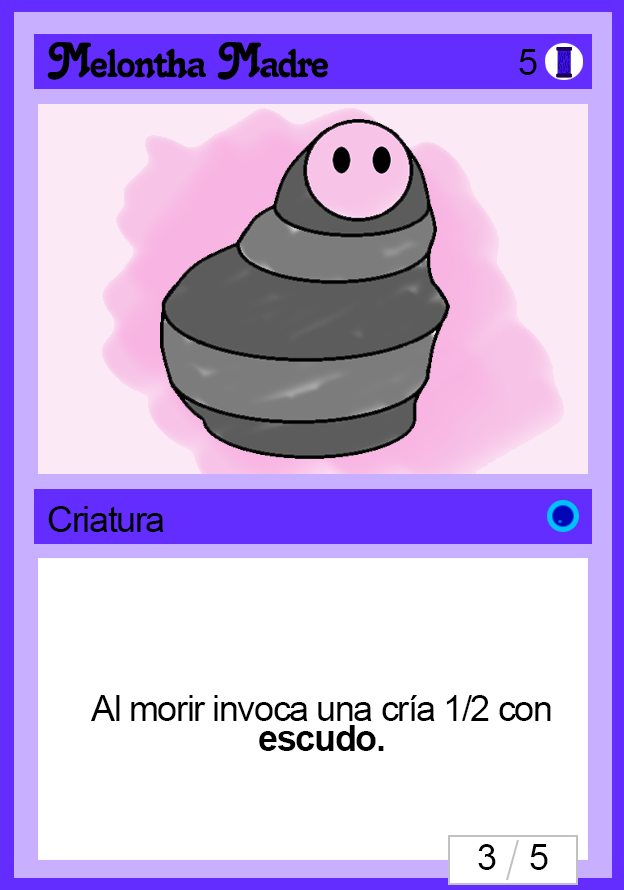
<style>
.page{position:relative;width:624px;height:890px;background:#ffffff}
.page>*{position:absolute;margin:0}
.t1{font:48px "Salina";letter-spacing:-0.04em;color:#000000}
.t2{font:36px "ArialMT";letter-spacing:-0.04em;color:#000000}
.t3{font:36px "Arial-BoldMT";letter-spacing:-0.04em;color:#000000}
</style>
<div class="page">
<p class="t1" style="left:47px;top:42px;width:281px;height:38px">Melontha Madre</p>
<p class="t2" style="left:519px;top:49px;width:18px;height:26px">5</p>
<p class="t2" style="left:48px;top:506px;width:116px;height:26px">Criatura</p>
<p class="t2" style="left:91px;top:695px;width:460px;height:56px">Al morir invoca una cría 1/2 con <span class="t3">escudo.</span></p>
<p class="t2" style="left:478px;top:844px;width:70px;height:26px">3    5</p>
</div>
